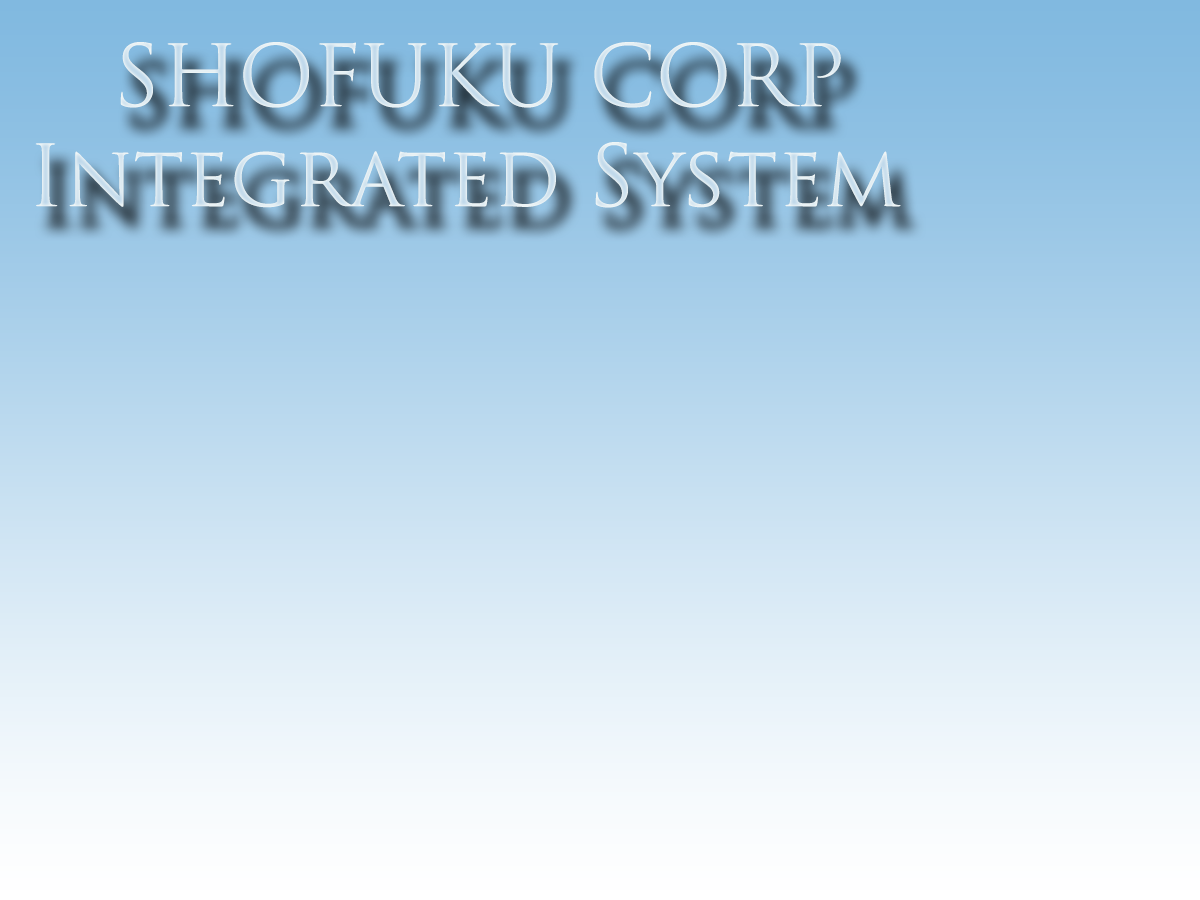
<style>
.page{position:relative;width:1200px;height:900px}
.page>*{position:absolute;margin:0}
.t1{font:83.3px "TrajanPro-Regular";color:#d6e6f0}
.t2{font:83.3px "Ravie";color:#d6e6f0}
</style>
<div class="page">
<p class="t1" style="left:35px;top:42px;width:866px;height:166px"><span class="t2">     </span>SHOFUKU CORP<br>   Integrated System</p>
</div>
